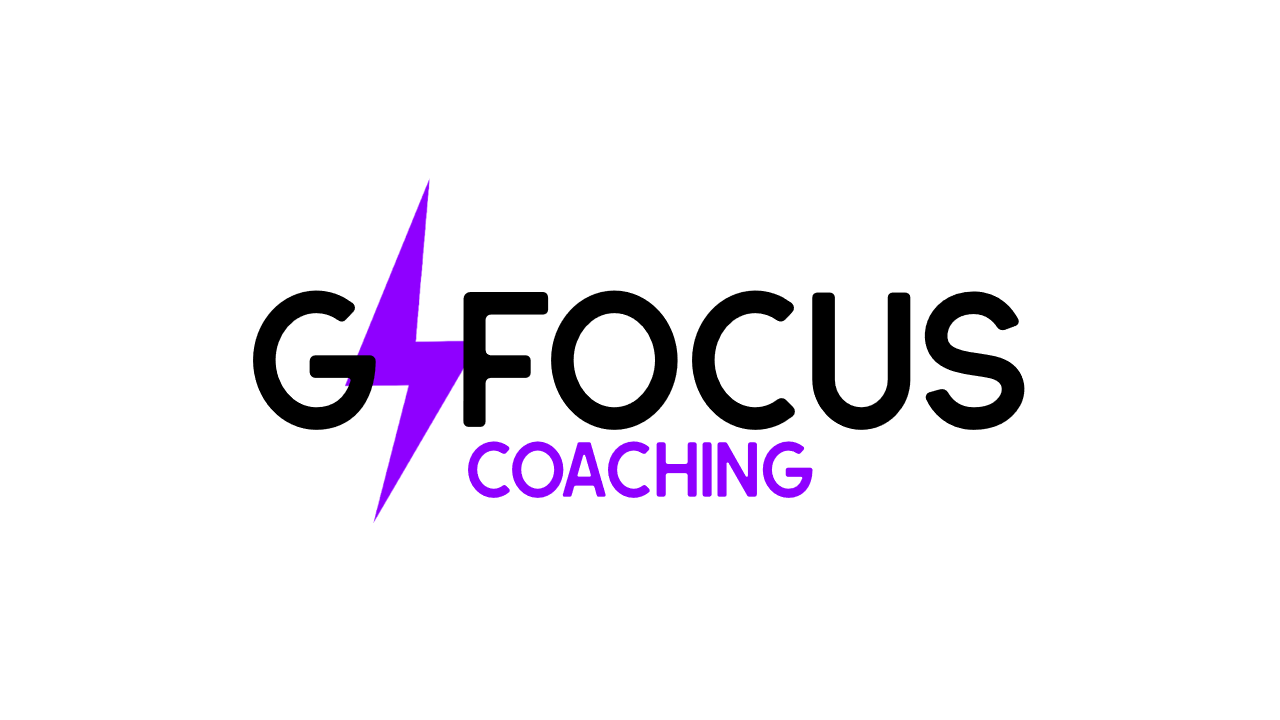
<style>
.page{position:relative;width:1280px;height:720px;background:#ffffff}
.page>*{position:absolute;margin:0}
.t1{font:185px "HillstownSansClean";color:#000000}
.t2{font:75px "HillstownSansClean";color:#8f00ff}
</style>
<div class="page">
<p class="t1" style="left:253px;top:290px;width:774px;height:140px">G  focus</p>
<p class="t2" style="left:468px;top:441px;width:345px;height:57px">COACHING</p>
</div>
